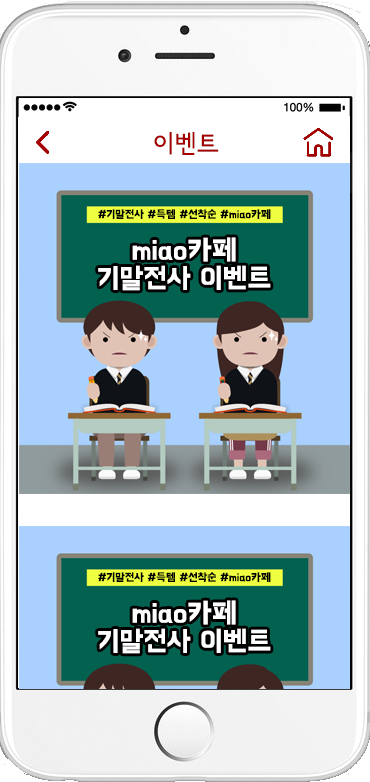
<style>
.page{position:relative;width:370px;height:782px}
.page>*{position:absolute;margin:0}
.t1{font:24px "SeoulNamsanL";color:#a40000;font-weight:bold}
.t2{font:11.3px "BMHANNA11yrsold";color:#000000}
.t3{font:28.4px/28.4px "BMHANNA11yrsold";color:#ffffff}
</style>
<div class="page">
<p class="t1" style="left:154px;top:132px;width:65px;height:23px">이벤트</p>
<p class="t2" style="left:98px;top:209px;width:173px;height:10px">#기말전사 #득템 #선착순 #miao카페</p>
<p class="t3" style="left:98px;top:237px;width:173px;height:54px;text-align:center">miao카페<br>기말전사 이벤트</p>
<p class="t2" style="left:98px;top:572px;width:173px;height:10px">#기말전사 #득템 #선착순 #miao카페</p>
<p class="t3" style="left:98px;top:600px;width:173px;height:54px;text-align:center">miao카페<br>기말전사 이벤트</p>
</div>
